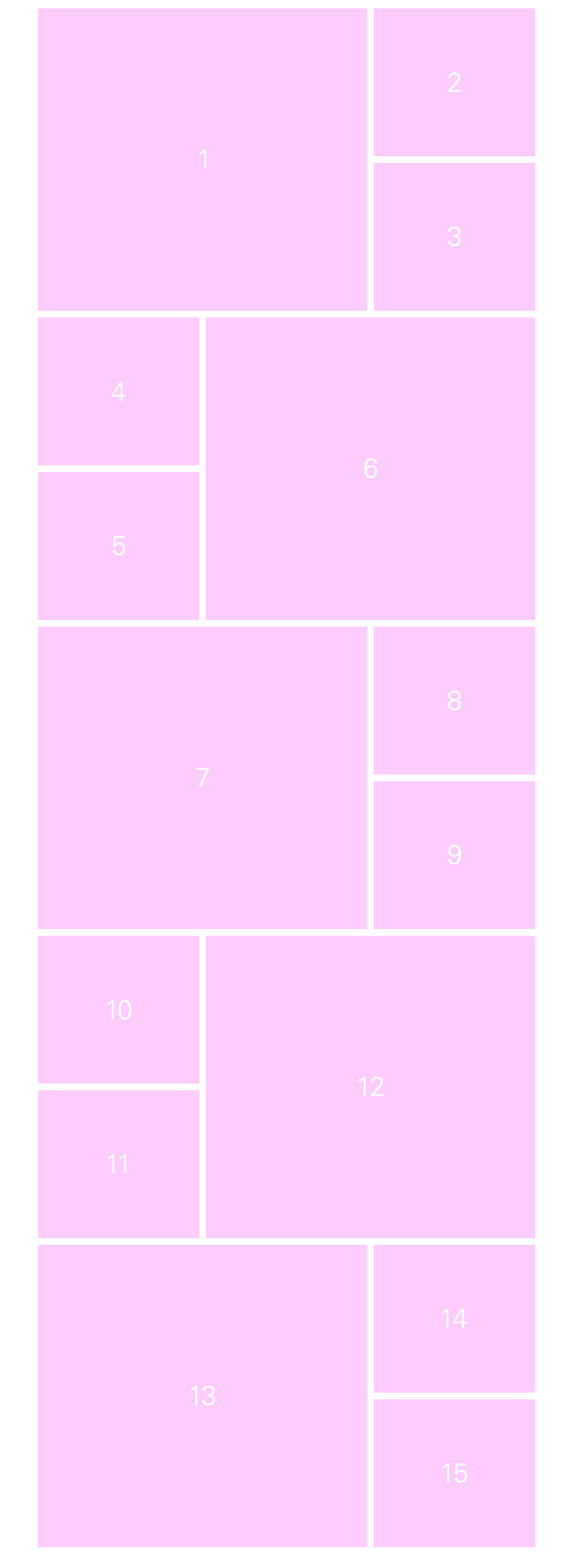
<style>
.page{position:relative;width:573px;height:1568px;background:#ffccff}
.page>*{position:absolute;margin:0}
.t1{font:26.9px "UniversLTStd-Light";color:#ffffff}
</style>
<div class="page">
<p class="t1" style="left:449px;top:72px;width:12px;height:20px">2</p>
<p class="t1" style="left:200px;top:150px;width:7px;height:19px">1</p>
<p class="t1" style="left:448px;top:226px;width:13px;height:20px">3</p>
<p class="t1" style="left:111px;top:382px;width:15px;height:19px">4</p>
<p class="t1" style="left:364px;top:458px;width:13px;height:20px">6</p>
<p class="t1" style="left:113px;top:536px;width:12px;height:20px">5</p>
<p class="t1" style="left:448px;top:690px;width:13px;height:21px">8</p>
<p class="t1" style="left:197px;top:768px;width:12px;height:19px">7</p>
<p class="t1" style="left:448px;top:844px;width:13px;height:21px">9</p>
<p class="t1" style="left:108px;top:1000px;width:24px;height:20px">10</p>
<p class="t1" style="left:360px;top:1076px;width:24px;height:20px">12</p>
<p class="t1" style="left:108px;top:1154px;width:19px;height:19px">11</p>
<p class="t1" style="left:442px;top:1309px;width:26px;height:19px">14</p>
<p class="t1" style="left:191px;top:1385px;width:25px;height:21px">13</p>
<p class="t1" style="left:443px;top:1463px;width:25px;height:20px">15</p>
</div>
